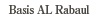
<style>
.page{position:relative;width:97px;height:19px;background:#ffffff}
.page>*{position:absolute;margin:0}
.t1{font:12px "RyuminPro-ExBold";letter-spacing:-0.04em;color:#4c4843;scale:0.9 1}
</style>
<div class="page">
<p class="t1" style="left:8px;top:5px;width:82px;height:10px">Basis AL Rabaul</p>
</div>
